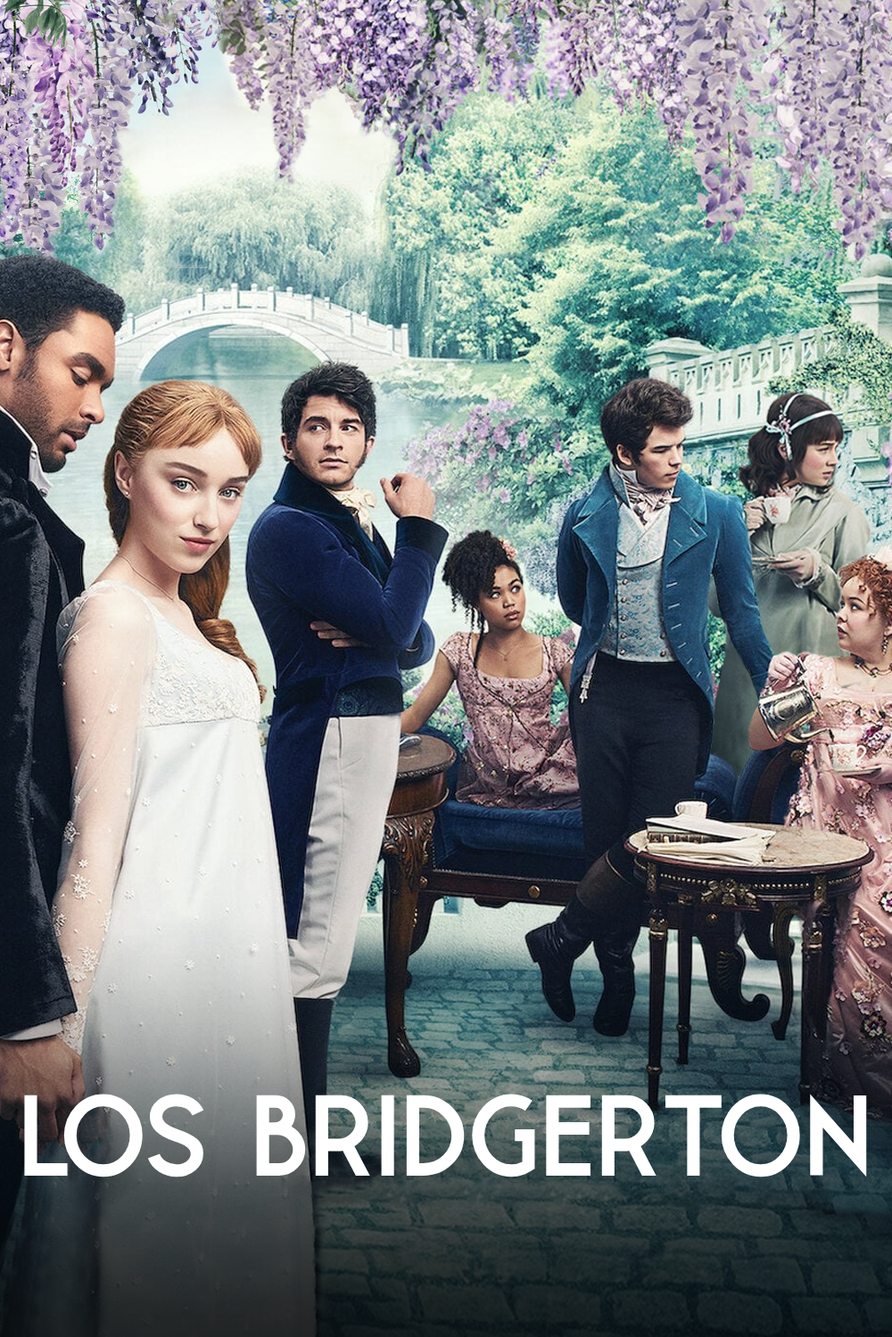
<style>
.page{position:relative;width:892px;height:1337px}
.page>*{position:absolute;margin:0}
.t1{font:115px "Leaner-Bold";color:#ffffff}
</style>
<div class="page">
<p class="t1" style="left:24px;top:1094px;width:843px;height:84px">LOS BRIDGERTON</p>
</div>
